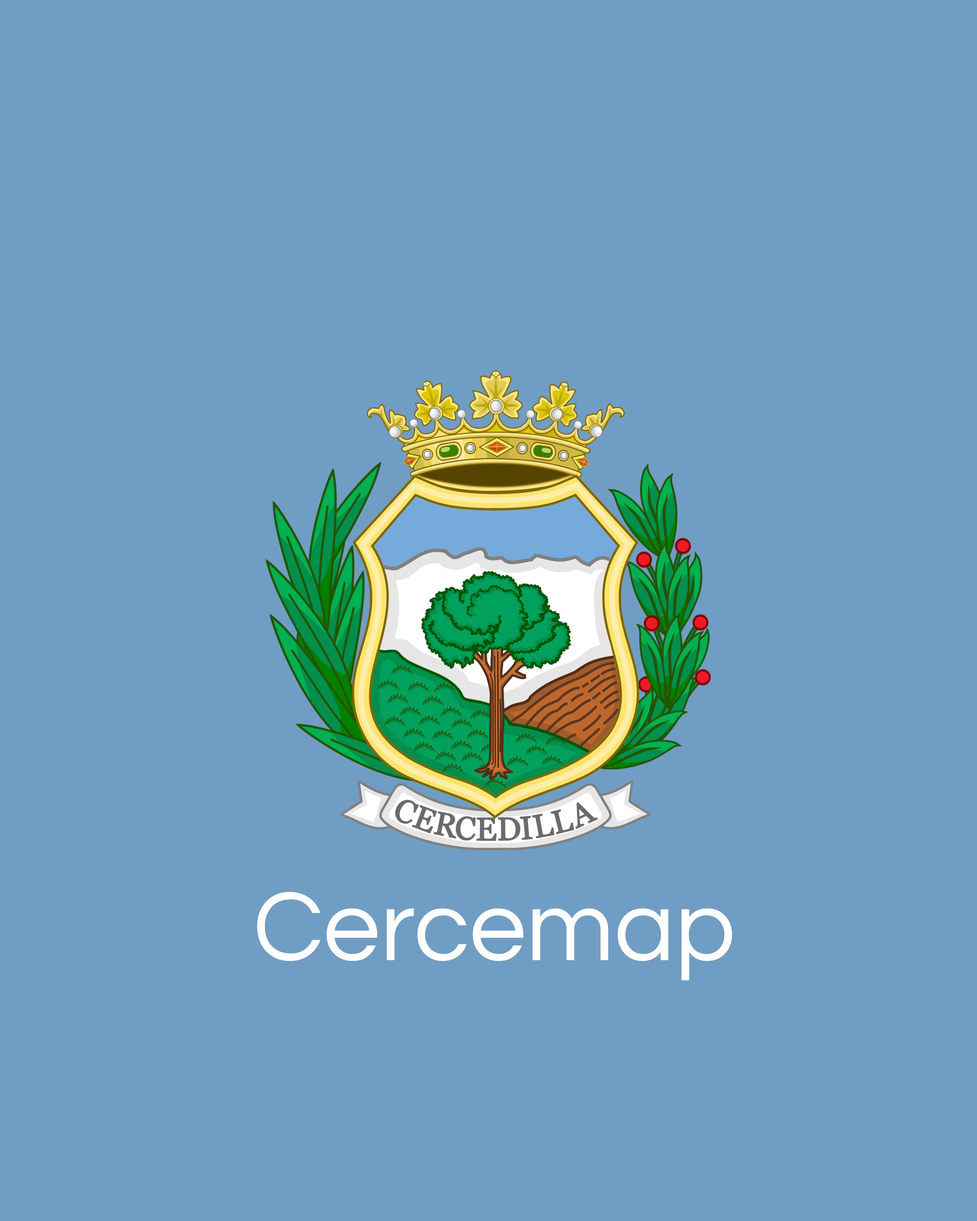
<style>
.page{position:relative;width:977px;height:1221px;background:#709dc3}
.page>*{position:absolute;margin:0}
.t1{font:101.7px "Questrial-Regular";color:#ffffff}
</style>
<div class="page">
<p class="t1" style="left:257px;top:892px;width:475px;height:88px">Cercemap</p>
</div>
